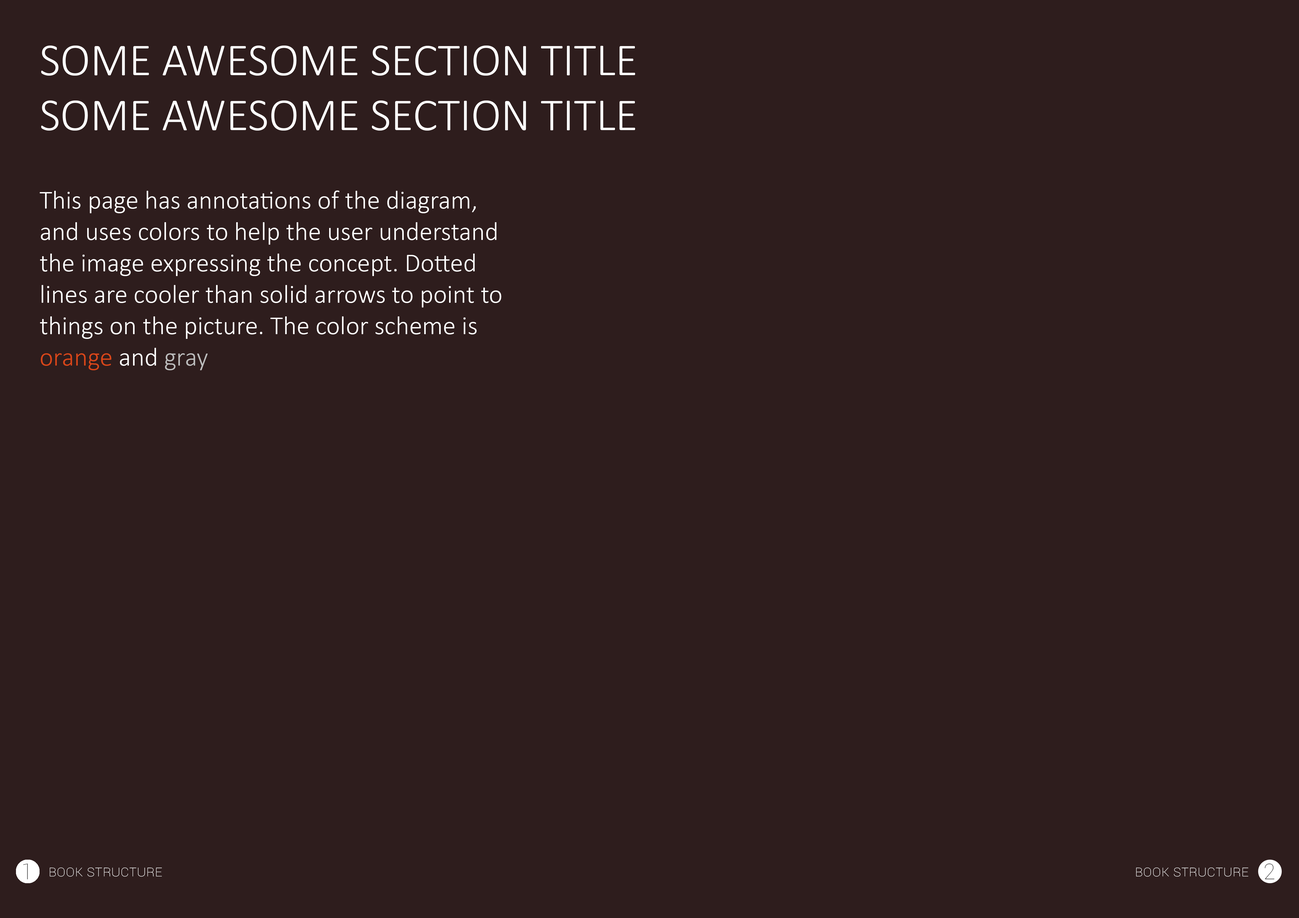
<style>
.page{position:relative;width:1299px;height:918px;background:#2e1d1d}
.page>*{position:absolute;margin:0}
.t1{font:45.8px "Calibri-Light";color:#ffffff;text-transform:uppercase}
.t2{font:26.2px "Calibri-Light";color:#ffffff}
.t3{font:26.2px "Calibri-Light";color:#d94619}
.t4{font:26.2px "Calibri-Light";color:#bcbcbc}
.t5{font:21.8px "Roboto-Thin";color:#484848}
.t6{font:15.3px "Roboto-Thin";color:#ffffff;font-variant:small-caps}
</style>
<div class="page">
<p class="t1" style="left:41px;top:46px;width:594px;height:85px">some awesome section title some awesome section title</p>
<p class="t2" style="left:40px;top:191px;width:461px;height:179px">This page has annotations of the diagram, and uses colors to help the user understand the image expressing the concept. Dotted lines are cooler than solid arrows to point to things on the picture. The color scheme is <span class="t3">orange </span>and <span class="t4">gray</span></p>
<p class="t5" style="left:23px;top:864px;width:5px;height:16px">1</p>
<p class="t6" style="left:50px;top:868px;width:112px;height:9px">Book structure</p>
<p class="t6" style="left:1136px;top:868px;width:112px;height:9px">Book structure</p>
<p class="t5" style="left:1264px;top:864px;width:10px;height:16px">2</p>
</div>
